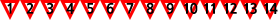
<style>
.page{position:relative;width:280px;height:20px;background:#ffffff}
.page>*{position:absolute;margin:0}
.t1{font:14px "NanumGothicExtraBold";letter-spacing:-0.1em;color:#000000}
</style>
<div class="page">
<p class="t1" style="left:7px;top:3px;width:5px;height:11px">1</p>
<p class="t1" style="left:26px;top:3px;width:8px;height:11px">2</p>
<p class="t1" style="left:46px;top:2px;width:8px;height:12px">3</p>
<p class="t1" style="left:66px;top:3px;width:8px;height:11px">4</p>
<p class="t1" style="left:87px;top:3px;width:7px;height:11px">5</p>
<p class="t1" style="left:106px;top:2px;width:8px;height:12px">6</p>
<p class="t1" style="left:126px;top:3px;width:8px;height:11px">7</p>
<p class="t1" style="left:146px;top:2px;width:8px;height:13px">8</p>
<p class="t1" style="left:166px;top:2px;width:8px;height:12px">9</p>
<p class="t1" style="left:184px;top:2px;width:14px;height:12px">10</p>
<p class="t1" style="left:204px;top:3px;width:11px;height:11px">11</p>
<p class="t1" style="left:224px;top:3px;width:13px;height:11px">12</p>
<p class="t1" style="left:244px;top:2px;width:13px;height:12px">13</p>
<p class="t1" style="left:264px;top:3px;width:14px;height:11px">14</p>
</div>
